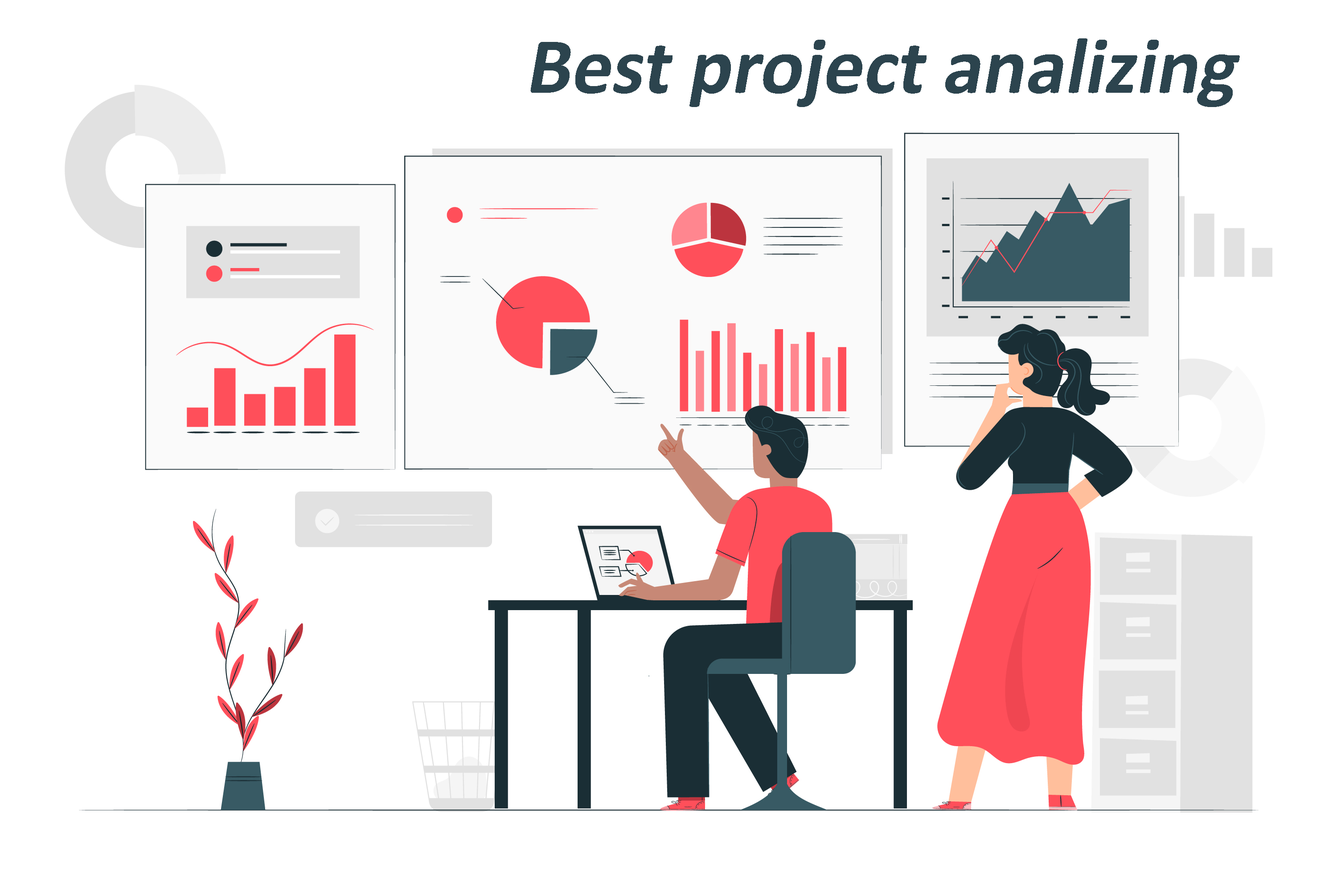
<style>
.page{position:relative;width:1337px;height:892px;background:#ffffff}
.page>*{position:absolute;margin:0}
.t1{font:80.2px "Calibri-Bold";color:#2c444e;font-style:italic}
</style>
<div class="page">
<p class="t1" style="left:531px;top:38px;width:709px;height:69px">Best project analizing</p>
</div>
